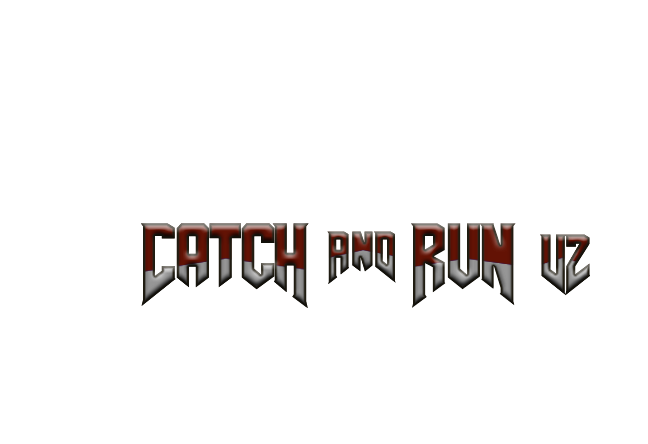
<style>
.page{position:relative;width:648px;height:444px;background:#ffffff}
.page>*{position:absolute;margin:0}
.t1{font:105.3px "AmazDooMLeft";letter-spacing:-0.04em;font-weight:bold}
.t2{font:105.3px "AmazDooMRight";font-weight:bold}
.t3{font:65.4px "AmazDooMLeft";font-weight:bold}
.t4{font:65.4px "AmazDooMRight";font-weight:bold}
.t5{font:105.3px "AmazDooMLeft";letter-spacing:-0.03em;font-weight:bold}
.t6{font:105.3px "AmazDooMRight";letter-spacing:-0.03em;font-weight:bold}
.t7{font:77.2px "AmazDooMRight";letter-spacing:-0.04em;font-weight:bold}
.t8{font:77.2px "AmazDooMLeft";letter-spacing:-0.04em;font-weight:bold}
</style>
<div class="page">
<p class="t1" style="left:141px;top:223px;width:168px;height:85px">Catc<span class="t2">H</span></p>
<p class="t1" style="left:141px;top:223px;width:168px;height:85px">Catc<span class="t2">H</span></p>
<p class="t3" style="left:327px;top:231px;width:69px;height:53px">An<span class="t4">D</span></p>
<p class="t3" style="left:327px;top:231px;width:69px;height:53px">An<span class="t4">D</span></p>
<p class="t5" style="left:411px;top:223px;width:105px;height:85px">Ru<span class="t6">N</span></p>
<p class="t5" style="left:411px;top:223px;width:105px;height:85px">Ru<span class="t6">N</span></p>
<p class="t7" style="left:540px;top:234px;width:50px;height:62px">V<span class="t8">2</span></p>
<p class="t7" style="left:540px;top:234px;width:50px;height:62px">V<span class="t8">2</span></p>
</div>
